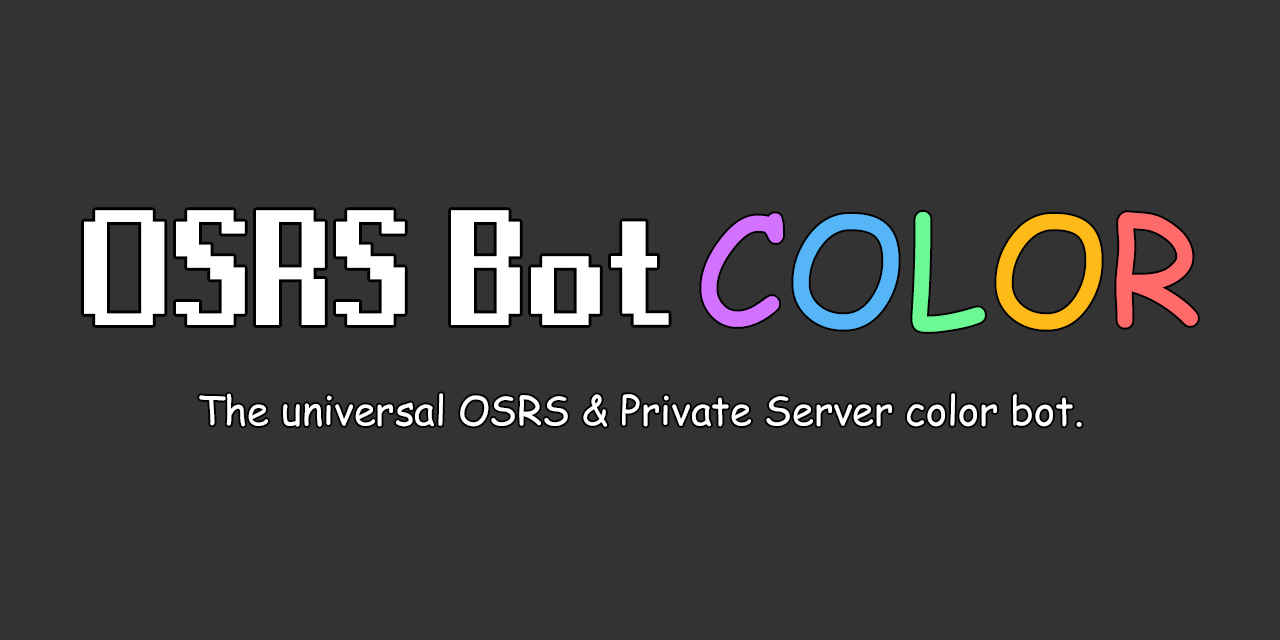
<style>
.page{position:relative;width:1280px;height:640px;background:#333333}
.page>*{position:absolute;margin:0}
.t1{font:40px "ComicSansMS";color:#ffffff}
</style>
<div class="page">
<p class="t1" style="left:199px;top:393px;width:883px;height:34px">The universal OSRS &amp; Private Server color bot.</p>
</div>
